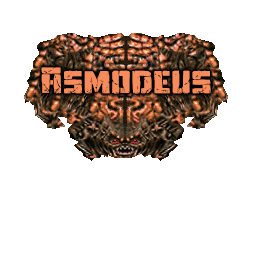
<style>
.page{position:relative;width:256px;height:256px;background:#ffffff}
.page>*{position:absolute;margin:0}
.t1{font:30px "TowerRuinsExpanded";color:#f68b5c}
</style>
<div class="page">
<p class="t1" style="left:41px;top:67px;width:170px;height:27px">Asmodeus</p>
</div>
